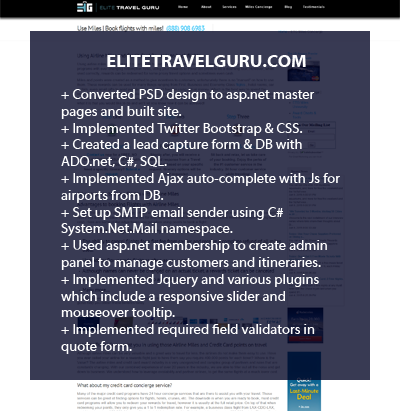
<style>
.page{position:relative;width:400px;height:411px;background:#383a53}
.page>*{position:absolute;margin:0}
.t1{font:18px "MyriadWebPro-Bold";color:#fefefe}
.t2{font:14px "MyriadWebPro";color:#fefefe}
</style>
<div class="page">
<p class="t1" style="left:107px;top:55px;width:199px;height:12px">ELITETRAVELGURU.COM</p>
<p class="t2" style="left:61px;top:89px;width:279px;height:265px">+ Converted PSD design to asp.net master     <br>pages and built site. <br>+ Implemented Twitter Bootstrap &amp; CSS. <br>+ Created a lead capture form &amp; DB with ADO.net, C#, SQL.<br>+ Implemented Ajax auto-complete with Js for airports from DB.<br>+ Set up SMTP email sender using C# System.Net.Mail namespace.<br>+ Used asp.net membership to create admin panel to manage customers and itineraries.<br>+ Implemented Jquery and various plugins which include a responsive slider and mouseover tooltip.<br>+ Implemented required field validators in quote form.<br>• Used javascript and ajax autocomplete to suggest airport codes obtained from SQL database.</p>
</div>
